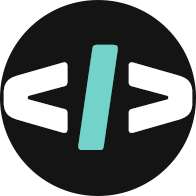
<style>
.page{position:relative;width:196px;height:196px;background:#141414}
.page>*{position:absolute;margin:0}
.t1{font:116.7px "Bungee-Regular";color:#ffffff}
.t2{font:116.7px "Bungee-Regular";color:#73d2ca}
</style>
<div class="page">
<p class="t1" style="left:3px;top:44px;width:190px;height:106px">&lt;<span class="t2">/</span>&gt;</p>
</div>
